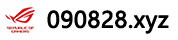
<style>
.page{position:relative;width:178px;height:40px;background:#ffffff}
.page>*{position:absolute;margin:0}
.t1{font:22px "MicrosoftYaHei";color:#000000;font-weight:bold}
</style>
<div class="page">
<p class="t1" style="left:47px;top:10px;width:122px;height:24px">090828.xyz</p>
</div>
